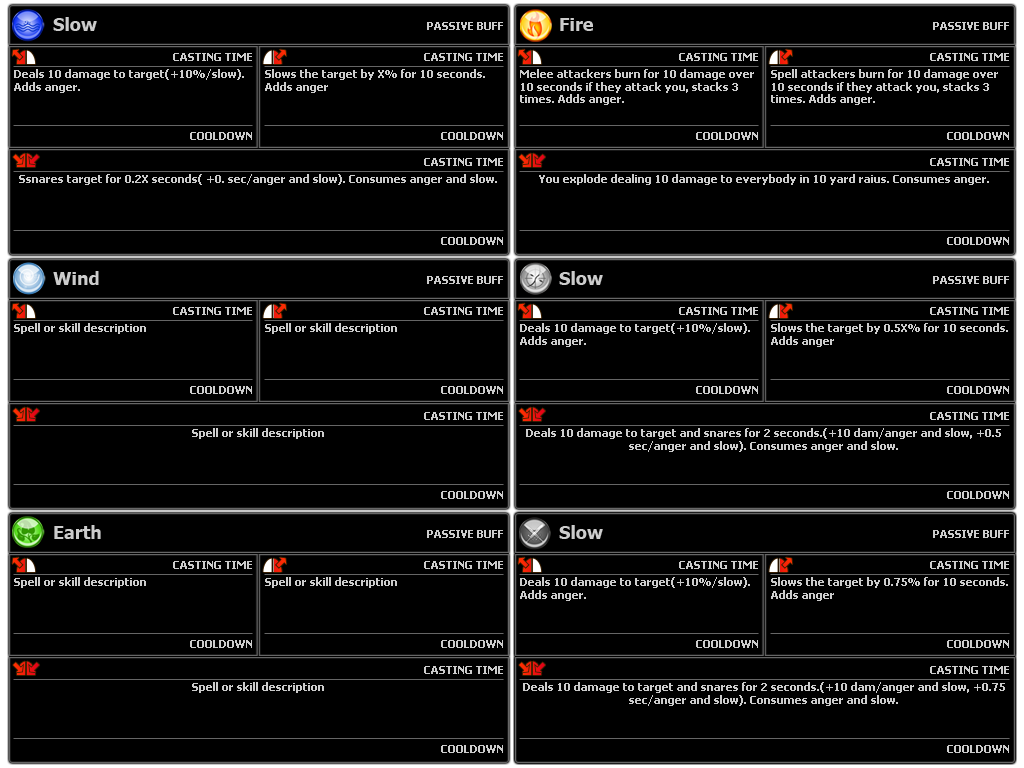
<style>
.page{position:relative;width:1024px;height:768px;background:#000000}
.page>*{position:absolute;margin:0}
.t1{font:18px "Tahoma-Bold";color:#cccccc}
.t2{font:11px "Tahoma-Bold";color:#cccccc;text-transform:uppercase}
.t3{font:11px/12.7px "Tahoma-Bold";color:#cccccc}
.t4{font:11px "Tahoma-Bold";color:#cccccc}
</style>
<div class="page">
<p class="t1" style="left:53px;top:17px;width:44px;height:14px">Slow</p>
<p class="t2" style="left:427px;top:22px;width:76px;height:8px">Passive buff</p>
<p class="t1" style="left:560px;top:18px;width:33px;height:13px">Fire</p>
<p class="t2" style="left:933px;top:22px;width:76px;height:8px">Passive buff</p>
<p class="t2" style="left:173px;top:53px;width:79px;height:8px">Casting time</p>
<p class="t2" style="left:424px;top:53px;width:79px;height:8px">Casting time</p>
<p class="t2" style="left:679px;top:53px;width:79px;height:8px">Casting time</p>
<p class="t2" style="left:930px;top:53px;width:79px;height:8px">Casting time</p>
<p class="t3" style="left:14px;top:69px;width:230px;height:24px">Deals 10 damage to target(+10%/slow). Adds anger.</p>
<p class="t3" style="left:265px;top:69px;width:220px;height:24px">Slows the target by X% for 10 seconds. Adds anger</p>
<p class="t3" style="left:520px;top:69px;width:234px;height:36px">Melee attackers burn for 10 damage over 10 seconds if they attack you, stacks 3 times. Adds anger.</p>
<p class="t3" style="left:771px;top:69px;width:227px;height:36px">Spell attackers burn for 10 damage over 10 seconds if they attack you, stacks 3 times. Adds anger.</p>
<p class="t2" style="left:190px;top:132px;width:62px;height:8px">Cooldown</p>
<p class="t2" style="left:441px;top:132px;width:62px;height:8px">Cooldown</p>
<p class="t2" style="left:696px;top:132px;width:62px;height:8px">Cooldown</p>
<p class="t2" style="left:947px;top:132px;width:62px;height:8px">Cooldown</p>
<p class="t2" style="left:424px;top:158px;width:79px;height:8px">Casting time</p>
<p class="t2" style="left:930px;top:158px;width:79px;height:8px">Casting time</p>
<p class="t4" style="left:19px;top:174px;width:478px;height:11px">Ssnares target for 0.2X seconds( +0. sec/anger and slow). Consumes anger and slow.</p>
<p class="t4" style="left:539px;top:174px;width:450px;height:11px">You explode dealing 10 damage to everybody in 10 yard raius. Consumes anger.</p>
<p class="t2" style="left:441px;top:237px;width:62px;height:8px">Cooldown</p>
<p class="t2" style="left:947px;top:237px;width:62px;height:8px">Cooldown</p>
<p class="t1" style="left:53px;top:271px;width:46px;height:14px">Wind</p>
<p class="t2" style="left:427px;top:276px;width:76px;height:8px">Passive buff</p>
<p class="t1" style="left:559px;top:271px;width:44px;height:14px">Slow</p>
<p class="t2" style="left:933px;top:276px;width:76px;height:8px">Passive buff</p>
<p class="t2" style="left:173px;top:307px;width:79px;height:8px">Casting time</p>
<p class="t2" style="left:424px;top:307px;width:79px;height:8px">Casting time</p>
<p class="t2" style="left:679px;top:307px;width:79px;height:8px">Casting time</p>
<p class="t2" style="left:930px;top:307px;width:79px;height:8px">Casting time</p>
<p class="t4" style="left:14px;top:323px;width:132px;height:11px">Spell or skill description</p>
<p class="t4" style="left:265px;top:323px;width:132px;height:11px">Spell or skill description</p>
<p class="t3" style="left:520px;top:323px;width:230px;height:24px">Deals 10 damage to target(+10%/slow). Adds anger.</p>
<p class="t3" style="left:771px;top:323px;width:237px;height:24px">Slows the target by 0.5X% for 10 seconds. Adds anger</p>
<p class="t2" style="left:190px;top:386px;width:62px;height:8px">Cooldown</p>
<p class="t2" style="left:441px;top:386px;width:62px;height:8px">Cooldown</p>
<p class="t2" style="left:696px;top:386px;width:62px;height:8px">Cooldown</p>
<p class="t2" style="left:947px;top:386px;width:62px;height:8px">Cooldown</p>
<p class="t2" style="left:424px;top:412px;width:79px;height:8px">Casting time</p>
<p class="t2" style="left:930px;top:412px;width:79px;height:8px">Casting time</p>
<p class="t4" style="left:192px;top:428px;width:132px;height:11px">Spell or skill description</p>
<p class="t3" style="left:526px;top:428px;width:475px;height:24px;text-align:center">Deals 10 damage to target and snares for 2 seconds.(+10 dam/anger and slow, +0.5 sec/anger and slow). Consumes anger and slow.</p>
<p class="t2" style="left:441px;top:491px;width:62px;height:8px">Cooldown</p>
<p class="t2" style="left:947px;top:491px;width:62px;height:8px">Cooldown</p>
<p class="t1" style="left:54px;top:525px;width:47px;height:14px">Earth</p>
<p class="t2" style="left:427px;top:530px;width:76px;height:8px">Passive buff</p>
<p class="t1" style="left:559px;top:525px;width:44px;height:14px">Slow</p>
<p class="t2" style="left:933px;top:530px;width:76px;height:8px">Passive buff</p>
<p class="t2" style="left:933px;top:530px;width:76px;height:8px">Passive buff</p>
<p class="t2" style="left:173px;top:561px;width:79px;height:8px">Casting time</p>
<p class="t2" style="left:424px;top:561px;width:79px;height:8px">Casting time</p>
<p class="t2" style="left:679px;top:561px;width:79px;height:8px">Casting time</p>
<p class="t2" style="left:679px;top:561px;width:79px;height:8px">Casting time</p>
<p class="t2" style="left:930px;top:561px;width:79px;height:8px">Casting time</p>
<p class="t2" style="left:930px;top:561px;width:79px;height:8px">Casting time</p>
<p class="t4" style="left:14px;top:577px;width:132px;height:11px">Spell or skill description</p>
<p class="t4" style="left:265px;top:577px;width:132px;height:11px">Spell or skill description</p>
<p class="t3" style="left:520px;top:577px;width:230px;height:24px">Deals 10 damage to target(+10%/slow). Adds anger.</p>
<p class="t3" style="left:771px;top:577px;width:237px;height:24px">Slows the target by 0.75% for 10 seconds. Adds anger</p>
<p class="t2" style="left:190px;top:640px;width:62px;height:8px">Cooldown</p>
<p class="t2" style="left:441px;top:640px;width:62px;height:8px">Cooldown</p>
<p class="t2" style="left:696px;top:640px;width:62px;height:8px">Cooldown</p>
<p class="t2" style="left:696px;top:640px;width:62px;height:8px">Cooldown</p>
<p class="t2" style="left:947px;top:640px;width:62px;height:8px">Cooldown</p>
<p class="t2" style="left:947px;top:640px;width:62px;height:8px">Cooldown</p>
<p class="t2" style="left:424px;top:666px;width:79px;height:8px">Casting time</p>
<p class="t2" style="left:930px;top:666px;width:79px;height:8px">Casting time</p>
<p class="t2" style="left:930px;top:666px;width:79px;height:8px">Casting time</p>
<p class="t4" style="left:192px;top:682px;width:132px;height:11px">Spell or skill description</p>
<p class="t3" style="left:523px;top:682px;width:482px;height:24px;text-align:center">Deals 10 damage to target and snares for 2 seconds.(+10 dam/anger and slow, +0.75 sec/anger and slow). Consumes anger and slow.</p>
<p class="t2" style="left:441px;top:745px;width:62px;height:8px">Cooldown</p>
<p class="t2" style="left:947px;top:745px;width:62px;height:8px">Cooldown</p>
<p class="t2" style="left:947px;top:745px;width:62px;height:8px">Cooldown</p>
</div>
